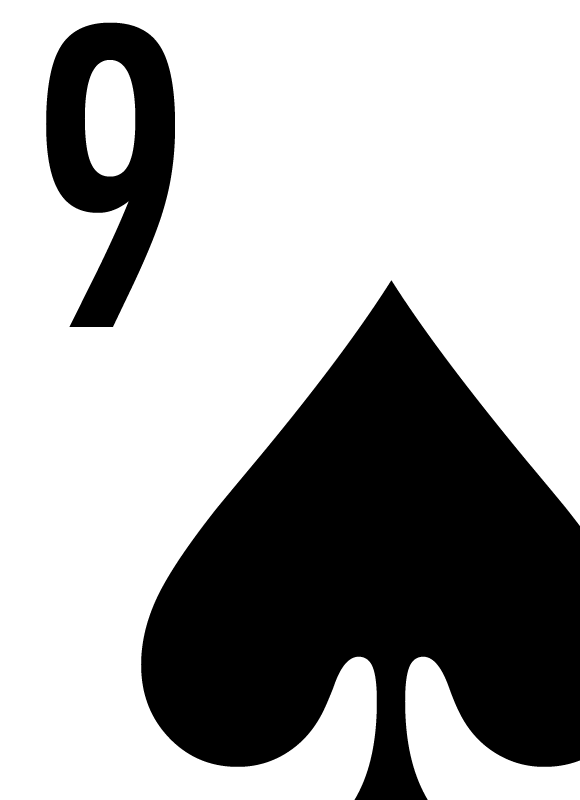
<style>
.page{position:relative;width:580px;height:800px;background:#ffffff}
.page>*{position:absolute;margin:0}
.t1{font:398.5px "Futura-CondensedMedium";color:#000000}
</style>
<div class="page">
<p class="t1" style="left:46px;top:22px;width:129px;height:305px">9</p>
</div>
